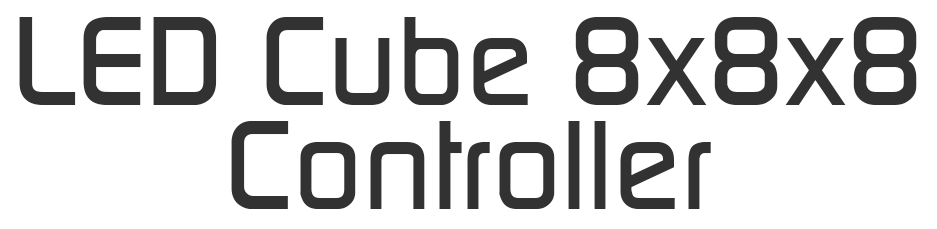
<style>
.page{position:relative;width:937px;height:229px;background:#ffffff}
.page>*{position:absolute;margin:0}
.t1{font:123.9px "ContinuumMedium";color:#323232}
</style>
<div class="page">
<p class="t1" style="left:19px;top:17px;width:898px;height:88px">LED Cube 8x8x8</p>
<p class="t1" style="left:231px;top:121px;width:480px;height:88px">Controller</p>
</div>
